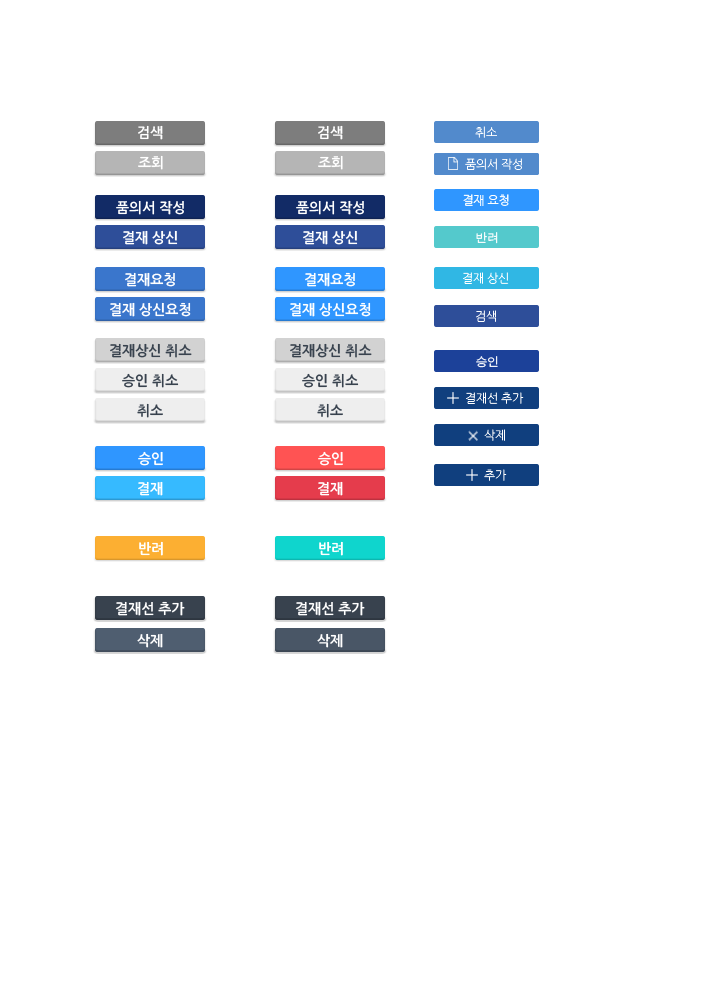
<style>
.page{position:relative;width:709px;height:1000px;background:#ffffff}
.page>*{position:absolute;margin:0}
.t1{font:14px "NanumGothicBold";color:#ffffff}
.t2{font:12px "NanumGothicOTFLight";letter-spacing:-0.025em;color:#ffffff}
.t3{font:12px "NanumGothic";letter-spacing:-0.025em;color:#ffffff}
.t4{font:12px "AppleGothic";letter-spacing:-0.025em;color:#ffffff}
.t5{font:14px "NanumGothicBold";color:#38424e}
</style>
<div class="page">
<p class="t1" style="left:138px;top:125px;width:25px;height:15px">검색</p>
<p class="t1" style="left:318px;top:125px;width:25px;height:15px">검색</p>
<p class="t2" style="left:475px;top:126px;width:22px;height:12px">취소</p>
<p class="t1" style="left:138px;top:155px;width:25px;height:15px">조회</p>
<p class="t1" style="left:318px;top:155px;width:25px;height:15px">조회</p>
<p class="t2" style="left:465px;top:158px;width:57px;height:12px">품의서 작성</p>
<p class="t2" style="left:465px;top:158px;width:57px;height:12px">품의서 작성</p>
<p class="t3" style="left:463px;top:194px;width:46px;height:12px">결재 요청</p>
<p class="t1" style="left:116px;top:200px;width:68px;height:15px">품의서 작성</p>
<p class="t1" style="left:296px;top:200px;width:68px;height:15px">품의서 작성</p>
<p class="t1" style="left:123px;top:230px;width:55px;height:15px">결재 상신</p>
<p class="t1" style="left:303px;top:230px;width:55px;height:15px">결재 상신</p>
<p class="t4" style="left:476px;top:232px;width:22px;height:12px">반려</p>
<p class="t1" style="left:125px;top:272px;width:50px;height:15px">결재요청</p>
<p class="t1" style="left:305px;top:272px;width:50px;height:15px">결재요청</p>
<p class="t2" style="left:463px;top:272px;width:46px;height:12px">결재 상신</p>
<p class="t1" style="left:110px;top:302px;width:81px;height:15px">결재 상신요청</p>
<p class="t1" style="left:290px;top:302px;width:81px;height:15px">결재 상신요청</p>
<p class="t2" style="left:476px;top:310px;width:20px;height:12px">검색</p>
<p class="t5" style="left:110px;top:343px;width:82px;height:15px">결재상신 취소</p>
<p class="t5" style="left:290px;top:343px;width:82px;height:15px">결재상신 취소</p>
<p class="t4" style="left:476px;top:356px;width:22px;height:12px">승인</p>
<p class="t5" style="left:122px;top:373px;width:57px;height:15px">승인 취소</p>
<p class="t5" style="left:302px;top:373px;width:57px;height:15px">승인 취소</p>
<p class="t2" style="left:466px;top:392px;width:58px;height:12px">결재선 추가</p>
<p class="t5" style="left:137px;top:403px;width:26px;height:15px">취소</p>
<p class="t5" style="left:317px;top:403px;width:26px;height:15px">취소</p>
<p class="t2" style="left:484px;top:429px;width:21px;height:12px">삭제</p>
<p class="t1" style="left:138px;top:451px;width:25px;height:15px">승인</p>
<p class="t1" style="left:318px;top:451px;width:25px;height:15px">승인</p>
<p class="t2" style="left:484px;top:469px;width:23px;height:12px">추가</p>
<p class="t1" style="left:138px;top:481px;width:25px;height:15px">결재</p>
<p class="t1" style="left:318px;top:481px;width:25px;height:15px">결재</p>
<p class="t1" style="left:139px;top:541px;width:24px;height:15px">반려</p>
<p class="t1" style="left:319px;top:541px;width:24px;height:15px">반려</p>
<p class="t1" style="left:116px;top:601px;width:69px;height:15px">결재선 추가</p>
<p class="t1" style="left:296px;top:601px;width:69px;height:15px">결재선 추가</p>
<p class="t1" style="left:137px;top:633px;width:26px;height:15px">삭제</p>
<p class="t1" style="left:317px;top:633px;width:26px;height:15px">삭제</p>
</div>
